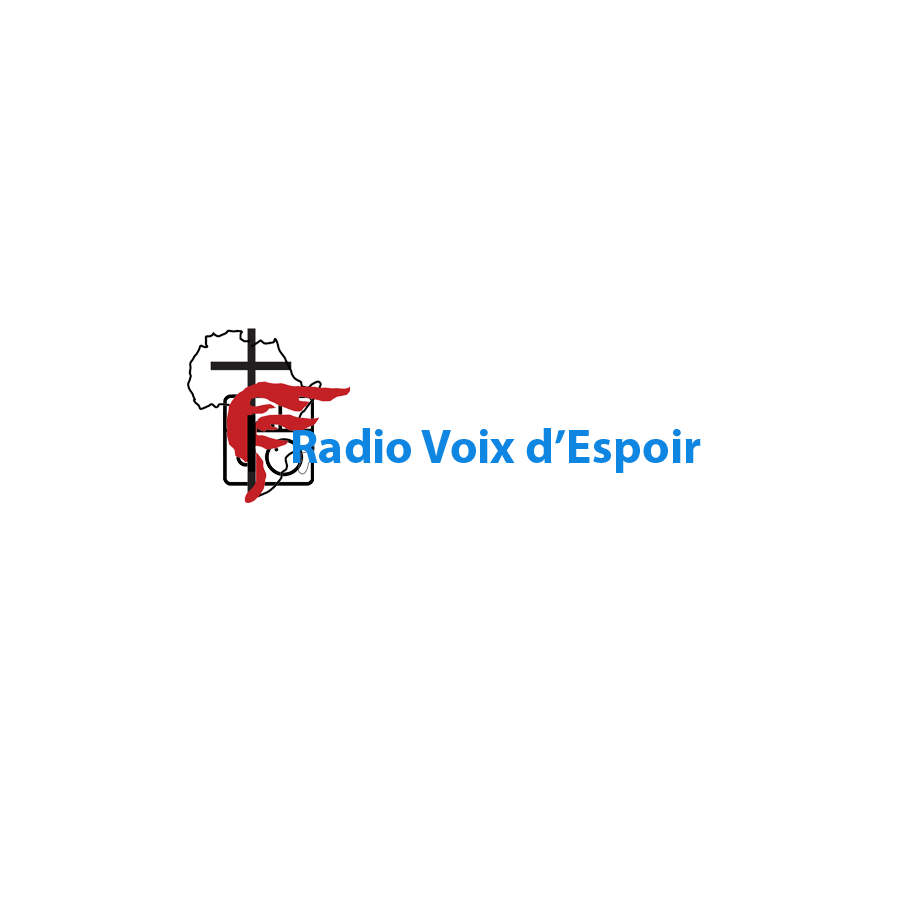
<style>
.page{position:relative;width:900px;height:900px;background:#ffffff}
.page>*{position:absolute;margin:0}
.t1{font:48px "MyriadPro-Bold";color:#0e86e2}
</style>
<div class="page">
<p class="t1" style="left:293px;top:428px;width:408px;height:45px">Radio Voix d’Espoir</p>
</div>
